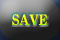
<style>
.page{position:relative;width:60px;height:40px}
.page>*{position:absolute;margin:0}
.t1{font:14px "MyungjoXB-HM"}
</style>
<div class="page">
<p class="t1" style="left:12px;top:14px;width:35px;height:11px">SAVE</p>
</div>
